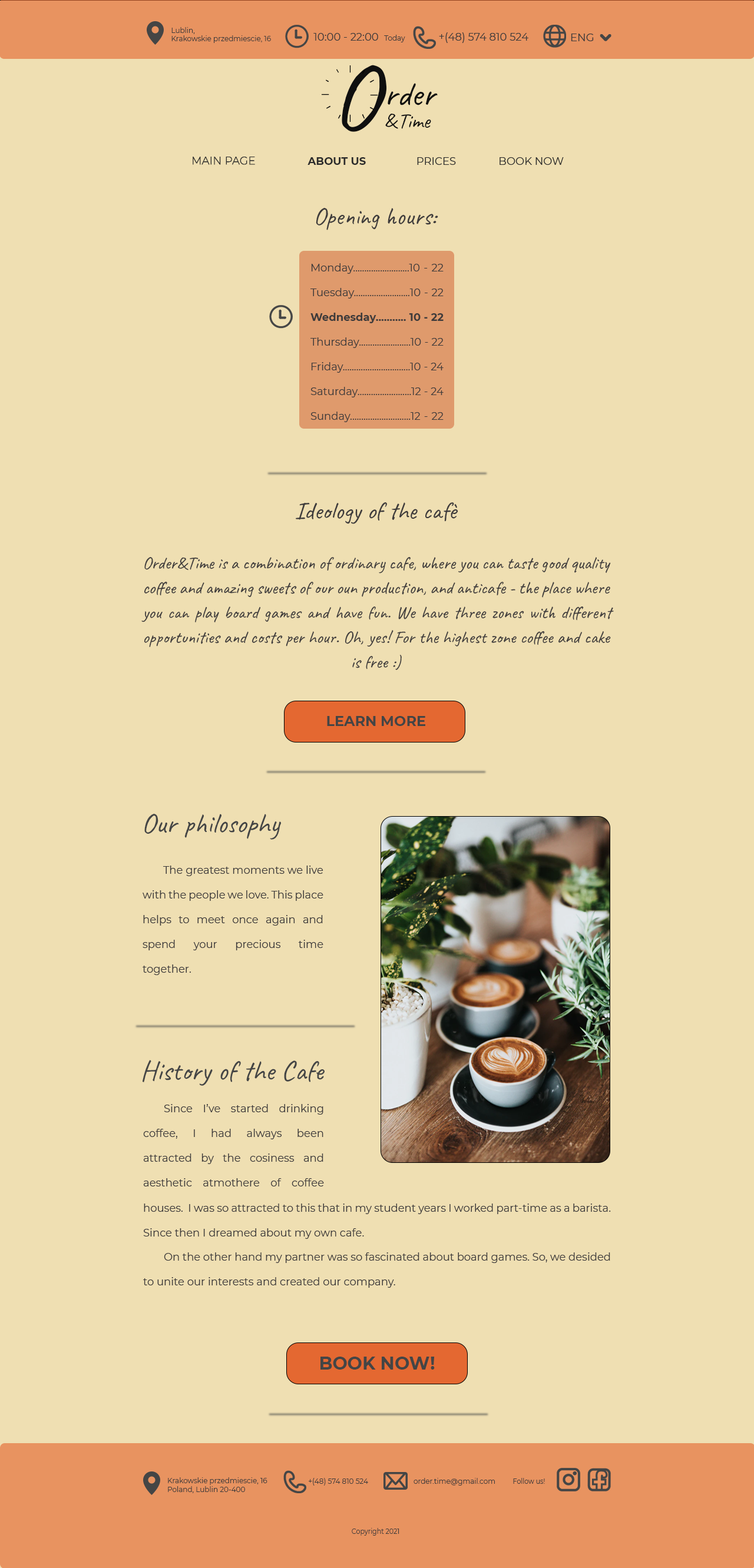
<style>
.page{position:relative;width:754px;height:1568px;background:#efdfb2}
.page>*{position:absolute;margin:0}
.t1{font:7.1px "Montserrat-Regular";color:#3e3b3b}
.t2{font:10.6px "Montserrat-Regular";color:#3e3b3b}
.t3{font:94.2px "Caveat-Regular";color:#0f0f0f}
.t4{font:35.3px "Caveat-Regular";color:#0f0f0f}
.t5{font:21.2px "Caveat-Regular";color:#0f0f0f}
.t6{font:10.6px "Montserrat-ExtraLight";color:#2b2b2b;font-weight:bold}
.t7{font:10.6px "Montserrat-Bold";color:#2b2b2b}
.t8{font:10.6px "Montserrat-Regular";color:#2b2b2b}
.t9{font:24.7px "Caveat-Regular";color:#3e3b3b}
.t10{font:10.6px/24.7px "Montserrat-Regular";color:#3e3b3b}
.t11{font:10.6px/24.7px "Montserrat-Bold";color:#3e3b3b}
.t12{font:17.7px/24.7px "Caveat-Regular";color:#3e3b3b}
.t13{font:14.1px "Montserrat-Bold";color:#444545}
.t14{font:28.3px "Caveat-Regular";color:#444545}
.t15{font:17.7px "Montserrat-Bold";color:#444545}
.t16{font:7.1px "Montserrat-Regular";color:#3e3b3b;scale:0.92 1}
</style>
<div class="page">
<p class="t1" style="left:171px;top:27px;width:100px;height:16px;text-align:justify">Lublin,<br>Krakowskie przedmiescie, 16</p>
<p class="t2" style="left:313px;top:33px;width:92px;height:9px">10:00 - 22:00  <span class="t1">Today</span></p>
<p class="t2" style="left:439px;top:32px;width:89px;height:11px">+(48) 574 810 524</p>
<p class="t2" style="left:571px;top:34px;width:23px;height:7px">ENG</p>
<p class="t3" style="left:342px;top:65px;width:45px;height:67px">O</p>
<p class="t4" style="left:387px;top:83px;width:50px;height:22px">rder</p>
<p class="t5" style="left:385px;top:114px;width:13px;height:15px">&amp;</p>
<p class="t5" style="left:401px;top:114px;width:30px;height:15px">Time</p>
<p class="t6" style="left:193px;top:157px;width:62px;height:8px">MAIN PAGE</p>
<p class="t7" style="left:307px;top:157px;width:59px;height:8px">ABOUT US</p>
<p class="t8" style="left:417px;top:157px;width:39px;height:8px">PRICES</p>
<p class="t8" style="left:499px;top:157px;width:64px;height:8px">BOOK NOW</p>
<p class="t9" style="left:316px;top:208px;width:122px;height:22px">Opening hours:</p>
<p class="t10" style="left:310px;top:263px;width:133px;height:159px;text-align:justify">Monday.........................10 - 22<br>Tuesday.........................10 - 22<br><span class="t11">Wednesday........... 10 - 22<br></span>Thursday.......................10 - 22<br>Friday..............................10 - 24<br>Saturday........................12 - 24<br>Sunday...........................12 - 22</p>
<p class="t9" style="left:296px;top:502px;width:162px;height:22px">Ideology of the cafè</p>
<p class="t12" style="left:141px;top:557px;width:473px;height:113px;text-align:justify">Order&amp;Time is a combination of ordinary cafe, where you can taste good quality coffee and amazing sweets of our oun production, and anticafe - the place where you can play board games and have fun. We have three zones with different opportunities and costs per hour. Oh, yes! For the highest zone coffee and cake is free :)</p>
<p class="t13" style="left:327px;top:716px;width:98px;height:10px">LEARN MORE</p>
<p class="t14" style="left:144px;top:814px;width:137px;height:26px">Our philosophy</p>
<p class="t10" style="left:142px;top:866px;width:181px;height:109px;text-align:justify">The greatest moments we live with the people we love. This place helps to meet once again and spend your precious time together.</p>
<p class="t14" style="left:142px;top:1060px;width:182px;height:26px">History of the Cafe</p>
<p class="t10" style="left:143px;top:1104px;width:181px;height:82px;text-align:justify">Since I’ve started drinking coffee, I had always been attracted by the cosiness and aesthetic atmothere of coffee</p>
<p class="t10" style="left:143px;top:1204px;width:468px;height:35px;text-align:justify">houses.  I was so attracted to this that in my student years I worked part-time as a barista. Since then I dreamed about my own cafe.</p>
<p class="t10" style="left:143px;top:1252px;width:467px;height:36px;text-align:justify">On the other hand my partner was so fascinated about board games. So, we desided to unite our interests and created our company.</p>
<p class="t15" style="left:320px;top:1357px;width:115px;height:13px">BOOK NOW!</p>
<p class="t1" style="left:168px;top:1477px;width:99px;height:16px;text-align:justify">Krakowskie przedmiescie, 16<br>Poland, Lublin 20-400</p>
<p class="t1" style="left:309px;top:1478px;width:59px;height:8px">+(48) 574 810 524</p>
<p class="t1" style="left:413px;top:1478px;width:82px;height:8px">order.time@gmail.com</p>
<p class="t16" style="left:513px;top:1478px;width:32px;height:6px">Follow us!</p>
<p class="t16" style="left:352px;top:1528px;width:47px;height:8px">Copyright 2021</p>
</div>
